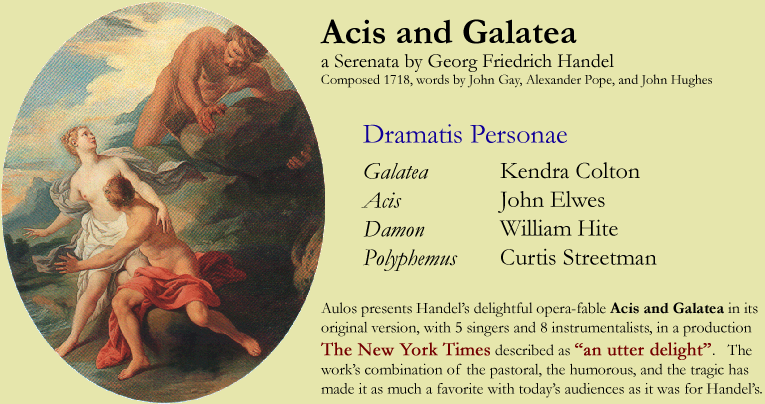
<style>
.page{position:relative;width:765px;height:404px;background:#e6e6ac}
.page>*{position:absolute;margin:0}
.t1{font:16px "Garamond";color:#000000}
.t2{font:36px "Garamond-Bold";color:#000000}
.t3{font:20px "Garamond";color:#000000}
.t4{font:14px "Garamond";color:#000000}
.t5{font:28px/30px "Garamond";color:#100099}
.t6{font:24px/36px "Garamond-Italic";color:#000000}
.t7{font:24px "Garamond-Italic";color:#000000}
.t8{font:16px "Garamond-Bold";color:#000000}
.t9{font:19px "Garamond";color:#740000;font-weight:bold}
.t10{font:24px "Garamond";color:#000000}
.t11{font:24px/36px "Garamond";color:#000000}
</style>
<div class="page">
<p class="t1" style="left:320px;top:19px;width:442px;height:379px"><span class="t2">Acis and Galatea<br></span><span class="t3">a Serenata by Georg Friedrich Handel<br></span><span class="t4">Composed 1718, words by John Gay, Alexander Pope, and John Hughes<br><br>       </span><span class="t5">Dramatis Personae<br>       </span><span class="t6">Galatea<br>       </span><span class="t7">Acis<br>       Damon<br>       Polyphemus<br><br></span>Aulos presents Handel’s delightful opera-fable <span class="t8">Acis and Galatea</span> in its<br>original version, with 5 singers and 8 instrumentalists, in a production<br><span class="t9">The New York Times</span> described as <span class="t9">“an utter delight”</span>.   The<br>work’s combination of the pastoral, the humorous, and the tragic has<br>made it as much a favorite with today’s audiences as it was for Handel’s.</p>
<p class="t10" style="left:498px;top:162px;width:159px;height:103px"><span class="t11">Kendra Colton<br></span>John Elwes<br>William Hite<br>Curtis Streetman</p>
</div>
